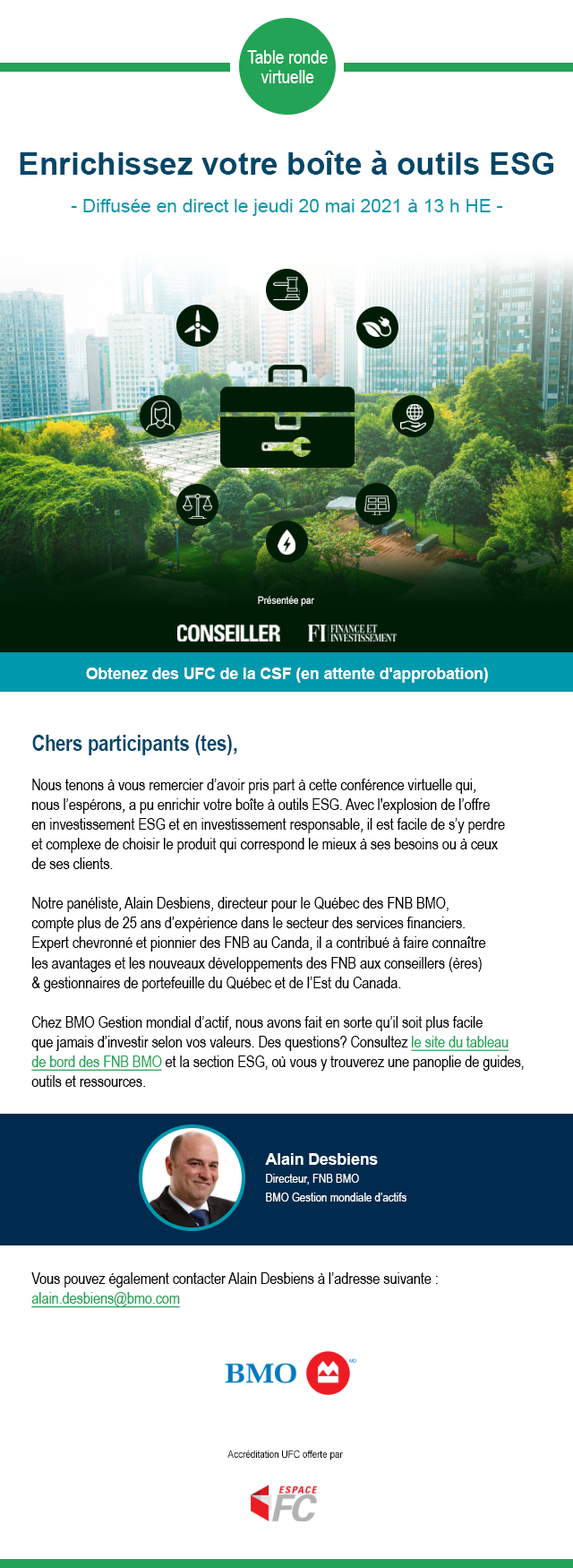
<style>
.page{position:relative;width:573px;height:1568px;background:#ffffff}
.page>*{position:absolute;margin:0}
.t1{font:18.8px/6.3px "ArialNarrow";color:#ffffff}
.t2{font:31.4px "Arial-BoldMT";color:#004769}
.t3{font:18.8px "ArialMT";color:#0098ad}
.t4{font:10.3px "ArialMT";letter-spacing:-0.025em;color:#ffffff;scale:0.92 1}
.t5{font:15.7px "Arial-BoldMT";color:#ffffff}
.t6{font:15.7px/6.3px "ArialNarrow";color:#000000}
.t7{font:22px/9.4px "ArialNarrow-Bold";color:#004769}
.t8{font:15.7px/6.3px "ArialNarrow";color:#22a355;text-decoration:underline}
.t9{font:12.6px/4.7px "ArialNarrow";color:#ffffff}
.t10{font:15.7px/4.7px "Arial-BoldMT";color:#ffffff}
.t11{font:10.3px "ArialMT";letter-spacing:-0.025em;color:#000000;scale:0.92 1}
</style>
<div class="page">
<p class="t1" style="left:247px;top:50px;width:81px;height:33px;text-align:center">Table ronde<br>virtuelle</p>
<p class="t2" style="left:20px;top:151px;width:534px;height:24px">Enrichissez votre boîte à outils ESG</p>
<p class="t3" style="left:71px;top:199px;width:432px;height:17px">- Diffusée en direct le jeudi 20 mai 2021 à 13 h HE -</p>
<p class="t4" style="left:258px;top:596px;width:56px;height:11px">Présentée par</p>
<p class="t5" style="left:86px;top:668px;width:402px;height:15px">Obtenez des UFC de la CSF (en attente d'approbation)</p>
<p class="t6" style="left:31px;top:735px;width:493px;height:573px"><span class="t7">Chers participants (tes),</span><br><br>Nous tenons à vous remercier d’avoir pris part à cette conférence virtuelle qui,<br>nous l’espérons, a pu enrichir votre boîte à outils ESG. Avec l'explosion de l’offre<br>en investissement ESG et en investissement responsable, il est facile de s’y perdre<br>et complexe de choisir le produit qui correspond le mieux à ses besoins ou à ceux<br>de ses clients.<br><br>Notre panéliste, Alain Desbiens, directeur pour le Québec des FNB BMO,<br>compte plus de 25 ans d’expérience dans le secteur des services financiers.<br>Expert chevronné et pionnier des FNB au Canda, il a contribué à faire connaître<br>les avantages et les nouveaux développements des FNB aux conseillers (ères)<br>&amp; gestionnaires de portefeuille du Québec et de l’Est du Canada.<br><br>Chez BMO Gestion mondial d’actif, nous avons fait en sorte qu’il soit plus facile<br>que jamais d’investir selon vos valeurs. Des questions? Consultez <span class="t8">le site du tableau<br>de bord des FNB BMO</span> et la section ESG, où vous y trouverez une panoplie de guides,<br>outils et ressources.<br><br><br><br><br><br><br><br><br><br>Vous pouvez également contacter Alain Desbiens à l’adresse suivante :<br><span class="t8">alain.desbiens@bmo.com</span></p>
<p class="t9" style="left:265px;top:1153px;width:142px;height:49px"><span class="t10">Alain Desbiens<br></span>Directeur, FNB BMO<br>BMO Gestion mondiale d’actifs</p>
<p class="t11" style="left:228px;top:1450px;width:115px;height:10px">Accréditation UFC offerte par</p>
</div>
